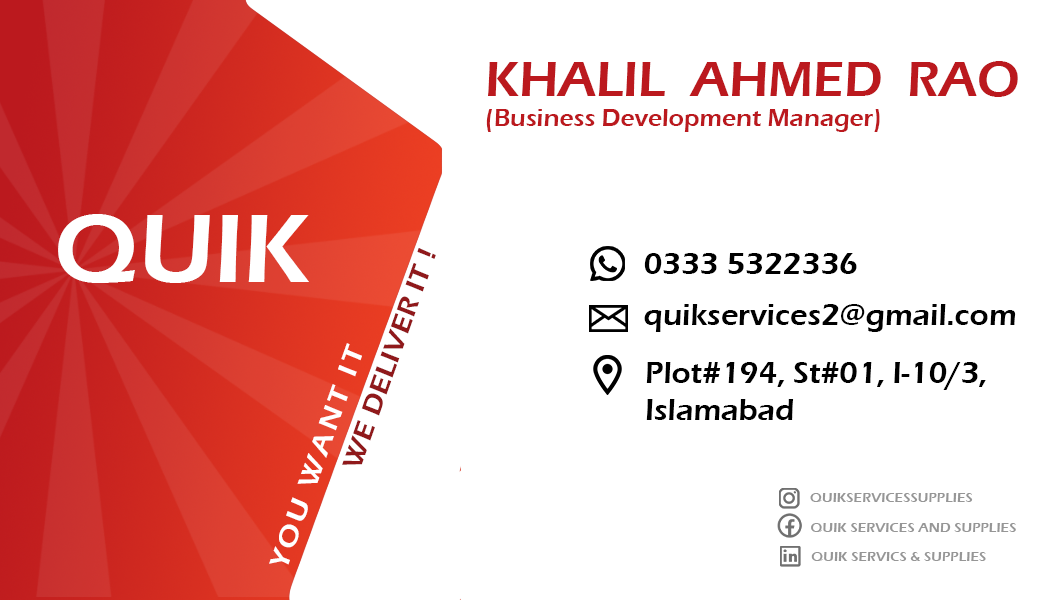
<style>
.page{position:relative;width:1050px;height:600px;background:#ffffff}
.page>*{position:absolute;margin:0}
.t1{font:25px/29.4px "ErasITC-Demi";color:#bb191e}
.t2{font:50.5px/65.6px "ErasITC-Demi";color:#bb191e}
.t3{font:99.8px "ErasITC-Demi";color:#ffffff}
.t4{font:27.8px "ErasITC-Demi";letter-spacing:0.02em;color:#90191b;scale:1.04 1}
.t5{font:30.9px "ErasITC-Demi";color:#000000}
.t6{font:30.9px "ErasITC-Demi";color:#010101}
.t7{font:27.8px "ErasITC-Demi";letter-spacing:0.1em;color:#ffffff;scale:1.09 1}
.t8{font:14.2px "ErasITC-Demi";color:#969696}
</style>
<div class="page">
<p class="t1" style="left:486px;top:61px;width:532px;height:71px"><span class="t2">KHALIL  AHMED  RAO<br></span>(Business Development Manager)</p>
<p class="t3" style="left:58px;top:214px;width:251px;height:69px">QUIK</p>
<p class="t4" style="left:342px;top:248px;width:94px;height:217px;rotate:-71deg">WE DELIVER IT !</p>
<p class="t5" style="left:644px;top:253px;width:213px;height:21px">0333 5322336</p>
<p class="t6" style="left:644px;top:304px;width:372px;height:28px">quikservices2@gmail.com</p>
<p class="t7" style="left:269px;top:343px;width:93px;height:222px;rotate:-71deg">YOU WANT IT</p>
<p class="t5" style="left:646px;top:362px;width:340px;height:58px">Plot#194, St#01, I-10/3,<br>Islamabad</p>
<p class="t8" style="left:810px;top:493px;width:163px;height:9px">QUIKSERVICESSUPPLIES</p>
<p class="t8" style="left:811px;top:523px;width:205px;height:9px">QUIK SERVICES AND SUPPLIES</p>
<p class="t8" style="left:811px;top:552px;width:175px;height:9px">QUIK SERVICS &amp; SUPPLIES</p>
</div>
